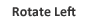
<style>
.page{position:relative;width:88px;height:23px;background:#ffffff}
.page>*{position:absolute;margin:0}
.t1{font:14px "Calibri-Bold";color:#363535}
</style>
<div class="page">
<p class="t1" style="left:12px;top:6px;width:64px;height:11px">Rotate Left</p>
</div>
